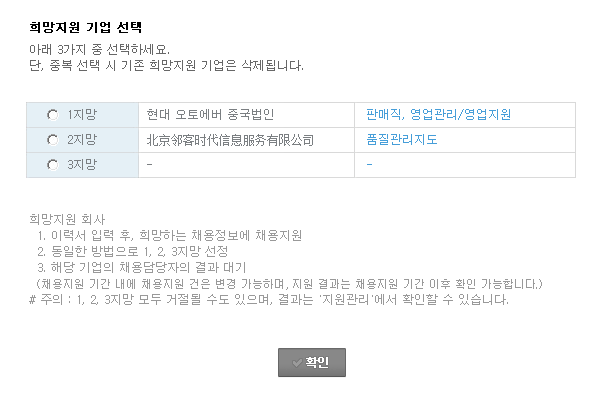
<style>
.page{position:relative;width:600px;height:400px;background:#ffffff}
.page>*{position:absolute;margin:0}
.t1{font:12px "Dotum";color:#010101;font-weight:bold}
.t2{font:12px/16px "Dotum";color:#676767}
.t3{font:12px "Dotum";color:#7b7f82}
.t4{font:12px "Dotum";color:#469ed9}
.t5{font:12px "SimSun";color:#7b7f82}
.t6{font:12px/16px "Dotum";color:#999999}
.t7{font:11px/16px "Dotum";color:#999999}
</style>
<div class="page">
<p class="t1" style="left:30px;top:22px;width:111px;height:11px">희망지원 기업 선택</p>
<p class="t2" style="left:30px;top:44px;width:273px;height:27px">아래 3가지 중 선택하세요. <br>단, 중복 선택 시 기존 희망지원 기업은 삭제됩니다.</p>
<p class="t3" style="left:69px;top:109px;width:28px;height:11px">1지망</p>
<p class="t3" style="left:147px;top:109px;width:126px;height:11px">현대 오토에버 중국법인</p>
<p class="t4" style="left:367px;top:109px;width:143px;height:11px">판매직, 영업관리/영업지원</p>
<p class="t3" style="left:68px;top:134px;width:29px;height:11px">2지망</p>
<p class="t5" style="left:147px;top:134px;width:166px;height:12px">北京邻客时代信息服务有限公司</p>
<p class="t4" style="left:367px;top:134px;width:70px;height:11px">품질관리지도</p>
<p class="t3" style="left:68px;top:159px;width:29px;height:11px">3지망</p>
<p class="t6" style="left:29px;top:214px;width:513px;height:91px">희망지원 회사<br>  1. 이력서 입력 후, 희망하는 채용정보에 채용지원<br>  2. 동일한 방법으로 1, 2, 3지망 선정<br>  3. 해당 기업의 채용담당자의 결과 대기<br><span class="t7">  (채용지원 기간 내에 채용지원 건은 변경 가능하며, 지원 결과는 채용지원 기간 이후 확인 가능합니다.)<br></span># 주의 : 1, 2, 3지망 모두 거절될 수도 있으며, 결과는 '지원관리'에서 확인할 수 있습니다.</p>
</div>
